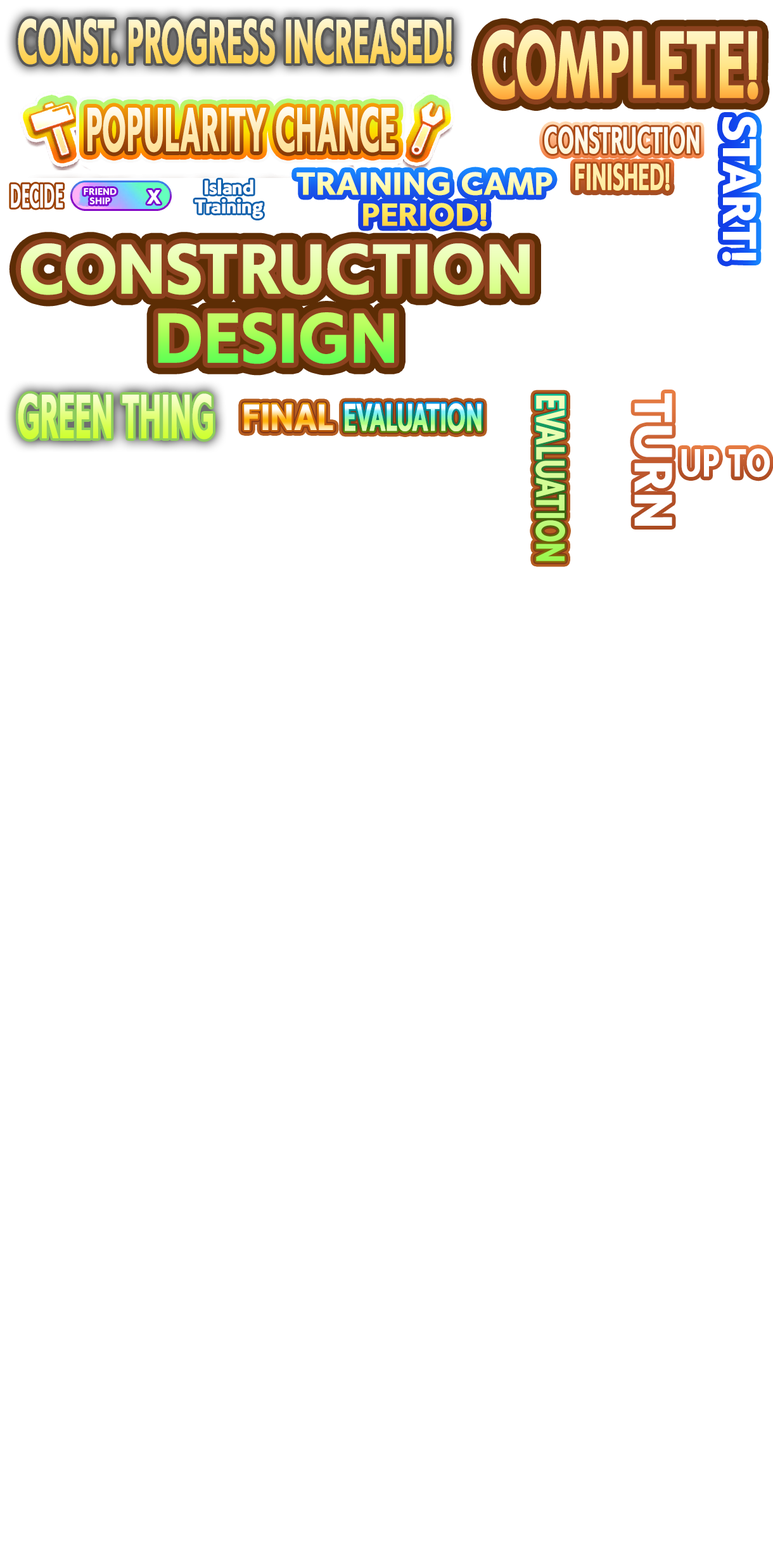
<style>
.page{position:relative;width:773px;height:1543px;background:#ffffff}
.page>*{position:absolute;margin:0}
.t1{font:50.9px "UMAE_UDKakugo_SmallPr6-E";letter-spacing:-0.005em;font-weight:bold;scale:0.48 1}
.t2{font:77.8px "UMAE_UDKakugo_SmallPr6-E";letter-spacing:-0.005em;font-weight:bold;scale:0.55 1}
.t3{font:38.6px "UMAE_UDKakugo_SmallPr6-E";letter-spacing:-0.005em;color:#ffffff;font-weight:bold}
.t4{font:30.5px "UMAE_UDKakugo_SmallPr6-E";letter-spacing:-0.005em;font-weight:bold;scale:0.55 1}
.t5{font:26px "UMAE_UDKakugo_SmallPr6-E";letter-spacing:-0.005em;font-weight:bold;scale:1.05 1}
.t6{font:27px "UMAE_UDKakugo_SmallPr6-E";letter-spacing:-0.005em;color:#ffffff;font-weight:bold;scale:0.45 1}
.t7{font:15.8px "UMAE_UDKakugo_SmallPr6-E";letter-spacing:-0.005em;color:#ffffff;font-weight:bold}
.t8{font:57.4px "UMAE_UDKakugo_SmallPr6-E";letter-spacing:-0.005em;font-weight:bold;scale:0.97 1}
.t9{font:32.8px "UMAE_UDKakugo_SmallPr6-E";letter-spacing:-0.005em;font-weight:bold;scale:0.72 1}
.t10{font:43.3px "UMAE_UDKakugo_SmallPr6-E";letter-spacing:-0.005em;color:#ffffff;font-weight:bold}
.t11{font:29.8px "UMAE_UDKakugo_SmallPr6-E";letter-spacing:-0.005em;font-weight:bold;scale:0.91 1}
.t12{font:31.4px "UMAE_UDKakugo_SmallPr6-E";letter-spacing:-0.005em;font-weight:bold;scale:0.62 1}
.t13{font:31.9px "UMAE_UDKakugo_SmallPr6-E";letter-spacing:-0.005em;color:#ffffff;font-weight:bold;scale:0.81 1}
</style>
<div class="page">
<p class="t1" style="left:18px;top:18px;width:434px;height:47px">CONST. PROGRESS INCREASED!</p>
<p class="t2" style="left:482px;top:30px;width:276px;height:69px">COMPLETE!</p>
<p class="t1" style="left:87px;top:106px;width:308px;height:47px">POPULARITY CHANCE</p>
<p class="t3" style="left:722px;top:117px;width:35px;height:145px;rotate:90deg">START!</p>
<p class="t4" style="left:544px;top:126px;width:155px;height:65px;text-align:center">CONSTRUCTION<br>FINISHED!</p>
<p class="t5" style="left:296px;top:172px;width:256px;height:55px;text-align:center">TRAINING CAMP<br>PERIOD!</p>
<p class="t6" style="left:11px;top:184px;width:52px;height:24px">DECIDE</p>
<p class="t7" style="left:194px;top:179px;width:69px;height:40px;text-align:center">Island<br>Training</p>
<p class="t7" style="left:147px;top:189px;width:14px;height:15px">X</p>
<p class="t8" style="left:20px;top:243px;width:510px;height:121px;text-align:center">CONSTRUCTION<br>DESIGN</p>
<p class="t1" style="left:18px;top:393px;width:195px;height:47px">GREEN THING</p>
<p class="t9" style="left:535px;top:395px;width:30px;height:166px;rotate:90deg">EVALUATION</p>
<p class="t10" style="left:633px;top:393px;width:39px;height:133px;rotate:90deg">TURN</p>
<p class="t11" style="left:244px;top:404px;width:89px;height:26px">FINAL</p>
<p class="t12" style="left:345px;top:403px;width:136px;height:28px">EVALUATION</p>
<p class="t13" style="left:681px;top:448px;width:89px;height:30px">UP TO</p>
</div>
